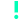
<style>
.page{position:relative;width:20px;height:20px;background:#ffffff}
.page>*{position:absolute;margin:0}
.t1{font:25px "Monofonto-Regular";color:#00ffb7}
</style>
<div class="page">
<p class="t1" style="left:14px;top:1px;width:5px;height:18px">!</p>
</div>
